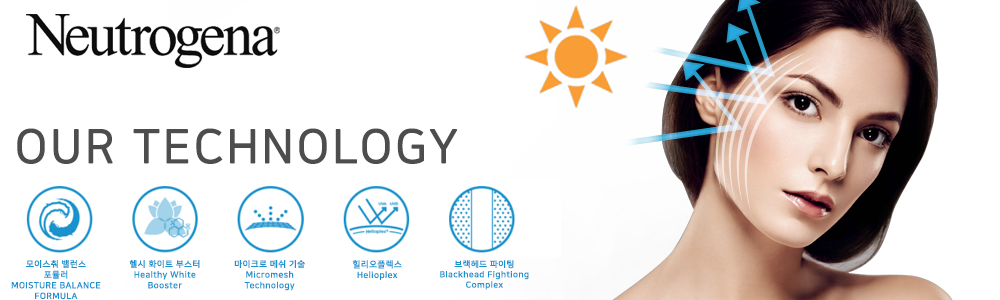
<style>
.page{position:relative;width:1000px;height:300px;background:#ffffff}
.page>*{position:absolute;margin:0}
.t1{font:45.9px "NanumSquareR";letter-spacing:0.05em;color:#4d4d4d;font-weight:bold}
.t2{font:8.5px/10.7px "NanumSquareB";letter-spacing:0.05em;color:#1a92ce}
.t3{font:8.6px/10.8px "NanumSquareB";letter-spacing:0.05em;color:#1a92ce}
.t4{font:8.3px/10.3px "NanumSquareB";letter-spacing:0.05em;color:#1a92ce;scale:1.04 1}
</style>
<div class="page">
<p class="t1" style="left:17px;top:128px;width:441px;height:36px">OUR TECHNOLOGY</p>
<p class="t2" style="left:11px;top:260px;width:90px;height:40px;text-align:center">모이스춰 밸런스<br>포뮬러<br>MOISTURE BALANCE<br>FORMULA</p>
<p class="t2" style="left:129px;top:259px;width:71px;height:30px;text-align:center">헬시 화이트 부스터<br>Healthy White<br>Booster</p>
<p class="t2" style="left:234px;top:260px;width:71px;height:31px;text-align:center">마이크로 메쉬 기술<br>Micromesh<br>Technology</p>
<p class="t3" style="left:352px;top:260px;width:50px;height:20px;text-align:center">힐리오플렉스<br>Helioplex</p>
<p class="t4" style="left:440px;top:260px;width:89px;height:30px;text-align:center">브랙헤드 파이팅<br>Blackhead Fightiong<br>Complex</p>
</div>
